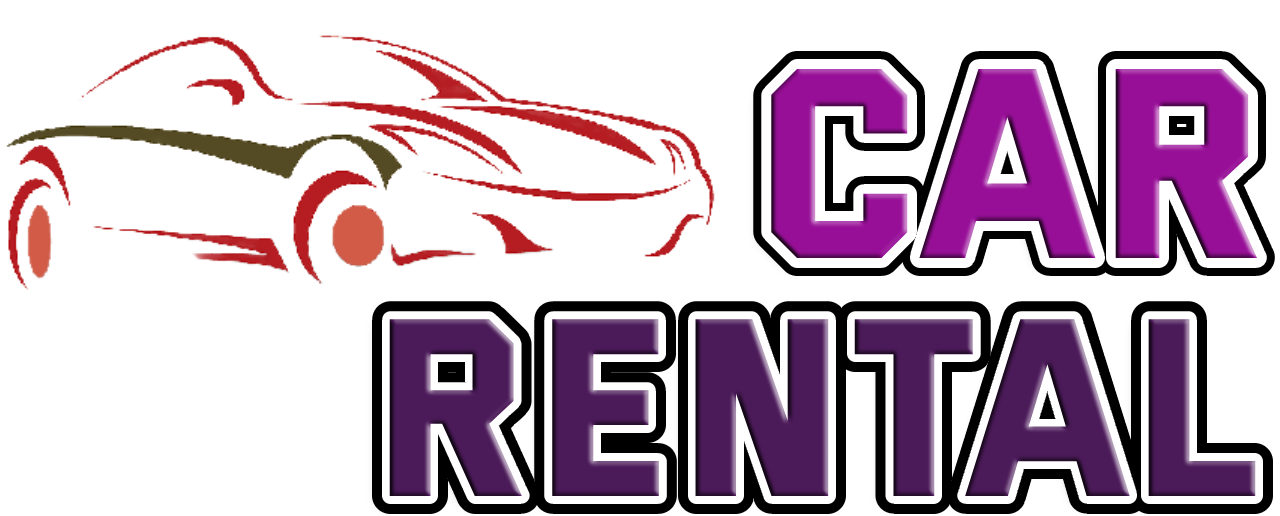
<style>
.page{position:relative;width:1280px;height:516px;background:#ffffff}
.page>*{position:absolute;margin:0}
.t1{font:270.8px "Versa-Versa";color:#970f97}
.t2{font:253.1px "Versa-Versa";color:#4b1a59}
</style>
<div class="page">
<p class="t1" style="left:771px;top:69px;width:486px;height:189px">Car</p>
<p class="t2" style="left:389px;top:319px;width:867px;height:177px">Rental</p>
</div>
